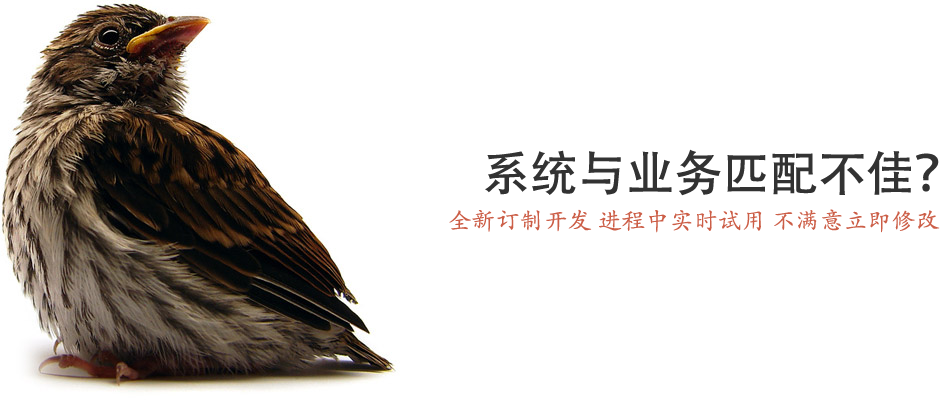
<style>
.page{position:relative;width:940px;height:400px;background:#ffffff}
.page>*{position:absolute;margin:0}
.t1{font:48px "AdobeHeitiStd-Regular";color:#333333}
.t2{font:24px "STKaiti";color:#cc5e47}
</style>
<div class="page">
<p class="t1" style="left:485px;top:149px;width:454px;height:47px">系统与业务匹配不佳？</p>
<p class="t2" style="left:449px;top:209px;width:491px;height:24px">全新订制开发 进程中实时试用 不满意立即修改</p>
</div>
